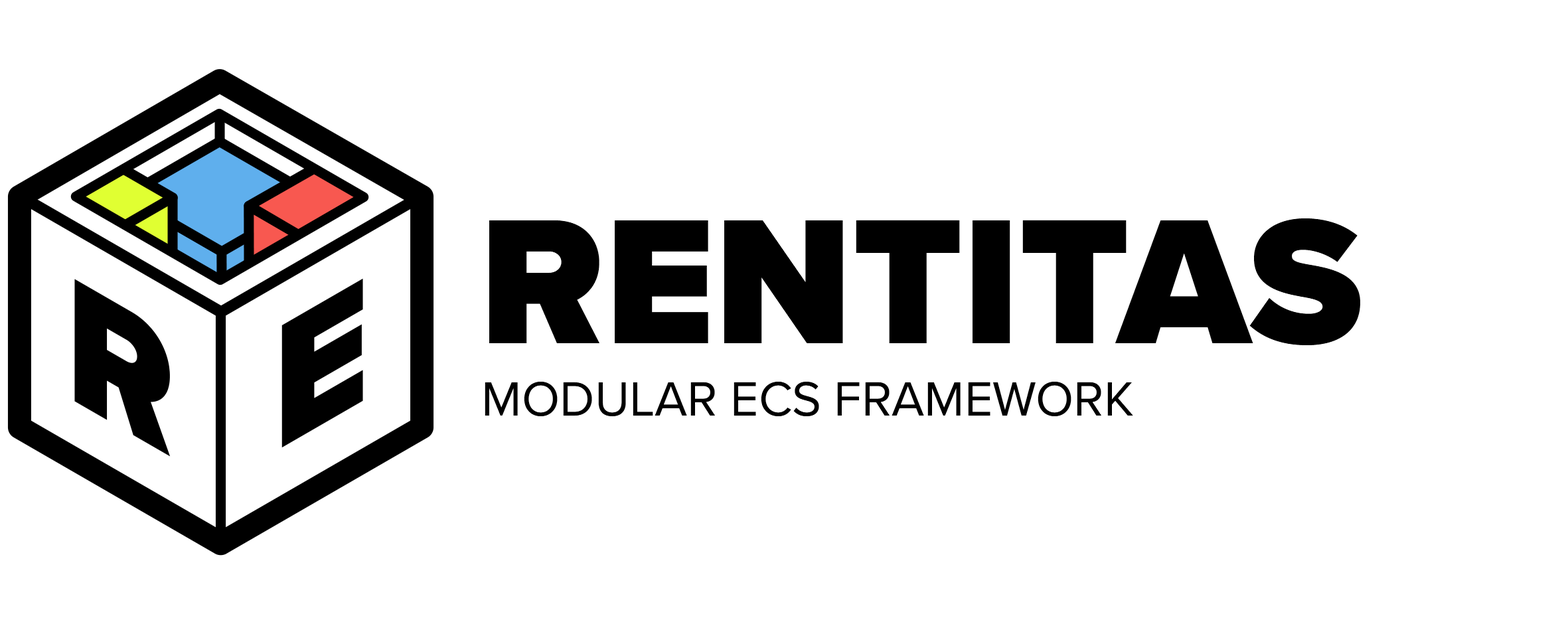
<style>
.page{position:relative;width:1568px;height:624px;background:#ffffff}
.page>*{position:absolute;margin:0}
.t1{font:184.5px "ProximaNova-Black";color:#000000;text-transform:uppercase}
.t2{font:49.7px "ProximaNova-Regular";color:#000000;text-transform:uppercase}
</style>
<div class="page">
<p class="t1" style="left:489px;top:218px;width:871px;height:127px">Rentitas</p>
<p class="t2" style="left:485px;top:382px;width:648px;height:35px">Modular ECS framework</p>
</div>
